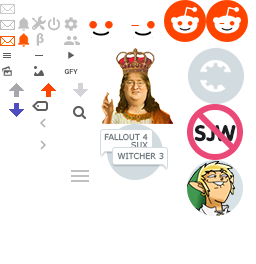
<style>
.page{position:relative;width:256px;height:264px;background:#ffffff}
.page>*{position:absolute;margin:0}
.t1{font:14px "MyriadPro-Bold";color:#c0c0c0}
.t2{font:7px "Roboto-Bold";color:#5d5d5d}
.t3{font:22px "VAGRoundedStd-Black";color:#1a1c1f}
.t4{font:8px/8px "Verdana";color:#67747a}
.t5{font:8px "Verdana";color:#67747a}
</style>
<div class="page">
<p class="t1" style="left:36px;top:33px;width:8px;height:13px">β</p>
<p class="t2" style="left:64px;top:69px;width:14px;height:5px">GFY</p>
<p class="t3" style="left:194px;top:125px;width:42px;height:17px">SJW</p>
<p class="t4" style="left:104px;top:133px;width:44px;height:16px;text-align:right">FALLOUT 4<br>SUX</p>
<p class="t5" style="left:117px;top:152px;width:47px;height:8px">WITCHER 3</p>
</div>
